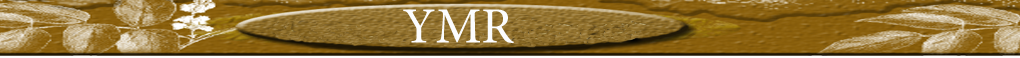
<style>
.page{position:relative;width:1020px;height:58px}
.page>*{position:absolute;margin:0}
.t1{font:50px "AdobeHebrew-Regular";color:#fbfcfe}
</style>
<div class="page">
<p class="t1" style="left:403px;top:9px;width:111px;height:34px">YMR</p>
</div>
